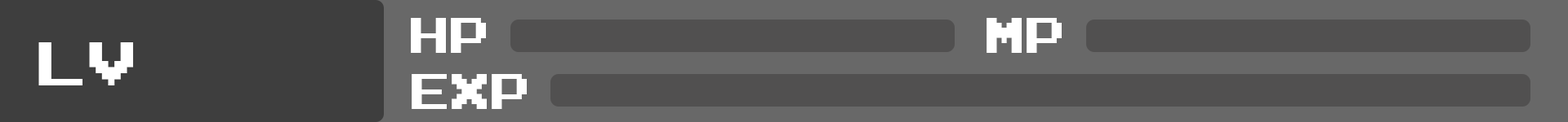
<style>
.page{position:relative;width:1568px;height:122px;background:#686868}
.page>*{position:absolute;margin:0}
.t1{font:40px "Emulogic";color:#ffffff}
.t2{font:50px "Emulogic";color:#ffffff}
</style>
<div class="page">
<p class="t1" style="left:411px;top:18px;width:75px;height:35px">hp</p>
<p class="t1" style="left:987px;top:18px;width:75px;height:35px">Mp</p>
<p class="t2" style="left:38px;top:42px;width:95px;height:44px">lv</p>
<p class="t1" style="left:412px;top:74px;width:115px;height:35px">exp</p>
</div>
